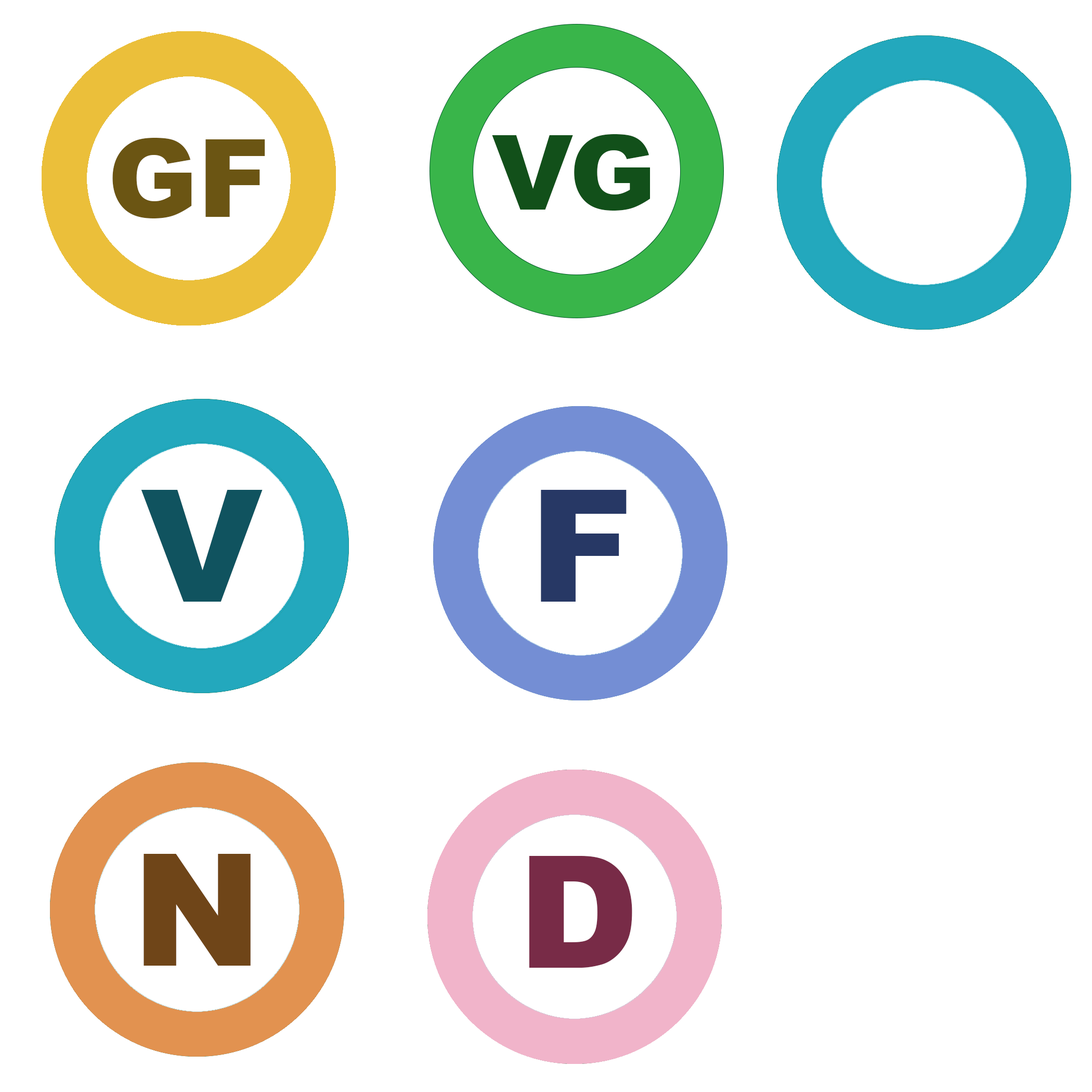
<style>
.page{position:relative;width:1092px;height:1092px;background:#ffffff}
.page>*{position:absolute;margin:0}
.t1{font:108.3px "Arial-Black";color:#6b5513}
.t2{font:156px "Arial-Black";color:#273865}
.t3{font:156px "Arial-Black";color:#6f4518}
.t4{font:156px "Arial-Black";color:#782b47}
</style>
<div class="page">
<p class="t1" style="left:112px;top:138px;width:153px;height:80px">GF</p>
<p class="t2" style="left:541px;top:490px;width:86px;height:112px">F</p>
<p class="t3" style="left:144px;top:854px;width:107px;height:112px">N</p>
<p class="t4" style="left:529px;top:856px;width:103px;height:112px">D</p>
</div>
